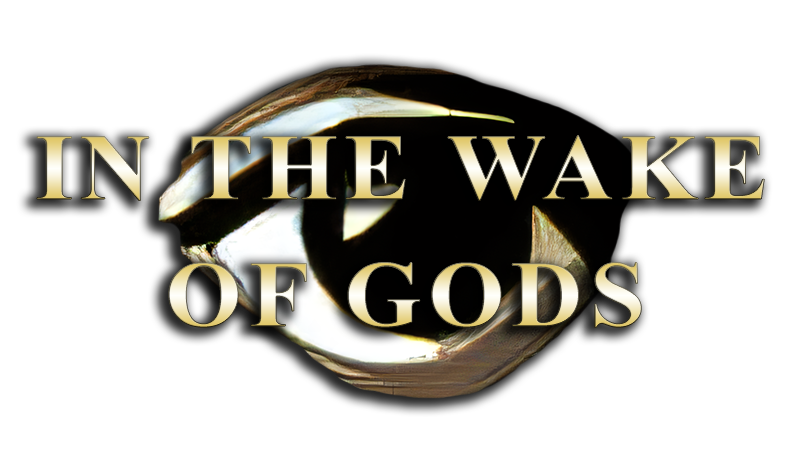
<style>
.page{position:relative;width:800px;height:472px;background:#ffffff}
.page>*{position:absolute;margin:0}
.t1{font:94px "TimesNewRomanPS-BoldMT";letter-spacing:0.07em;scale:1.05 1}
</style>
<div class="page">
<p class="t1" style="left:37px;top:135px;width:728px;height:66px">IN THE WAKE</p>
<p class="t1" style="left:168px;top:262px;width:474px;height:66px">OF GODS</p>
</div>
